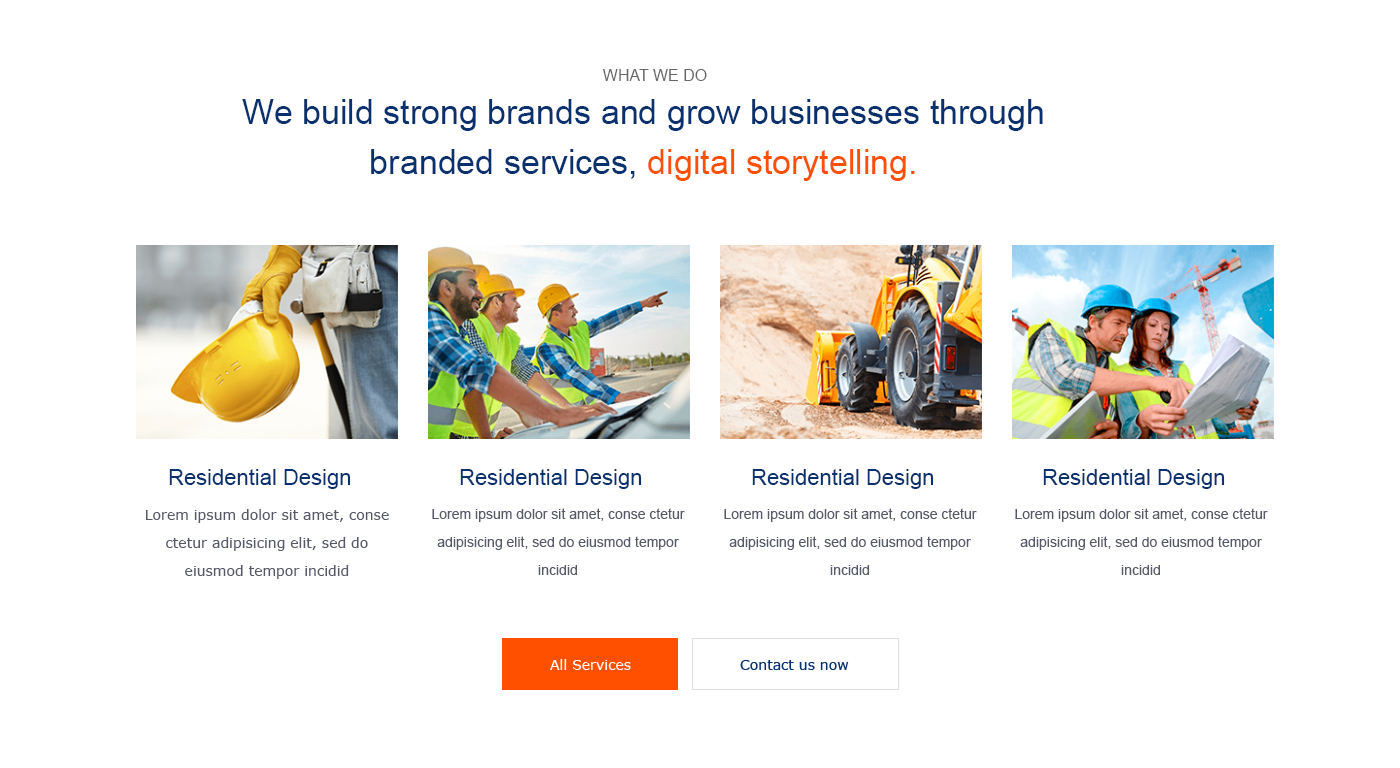
<style>
.page{position:relative;width:1400px;height:768px;background:#ffffff}
.page>*{position:absolute;margin:0}
.t1{font:16px "ArialMT";color:#666666}
.t2{font:34px/50px "ArialMT";color:#09316f}
.t3{font:34px/50px "ArialMT";color:#ff5000}
.t4{font:22px "ArialMT";color:#09316f}
.t5{font:14px/28px "Verdana";color:#565969}
.t6{font:14px/28px "ArialMT";color:#565969}
</style>
<div class="page">
<p class="t1" style="left:603px;top:69px;width:104px;height:12px">WHAT WE DO</p>
<p class="t2" style="left:242px;top:99px;width:801px;height:82px;text-align:center">We build strong brands and grow businesses through branded services, <span class="t3">digital storytelling.</span></p>
<p class="t4" style="left:169px;top:469px;width:182px;height:20px">Residential Design</p>
<p class="t4" style="left:460px;top:469px;width:182px;height:20px">Residential Design</p>
<p class="t4" style="left:752px;top:469px;width:182px;height:20px">Residential Design</p>
<p class="t4" style="left:1043px;top:469px;width:182px;height:20px">Residential Design</p>
<p class="t5" style="left:146px;top:509px;width:243px;height:70px;text-align:center">Lorem ipsum dolor sit amet, conse ctetur adipisicing elit, sed do eiusmod tempor incidid</p>
<p class="t6" style="left:432px;top:508px;width:253px;height:67px;text-align:center">Lorem ipsum dolor sit amet, conse ctetur adipisicing elit, sed do eiusmod tempor incidid</p>
<p class="t6" style="left:724px;top:508px;width:253px;height:67px;text-align:center">Lorem ipsum dolor sit amet, conse ctetur adipisicing elit, sed do eiusmod tempor incidid</p>
<p class="t6" style="left:1015px;top:508px;width:253px;height:67px;text-align:center">Lorem ipsum dolor sit amet, conse ctetur adipisicing elit, sed do eiusmod tempor incidid</p>
</div>
